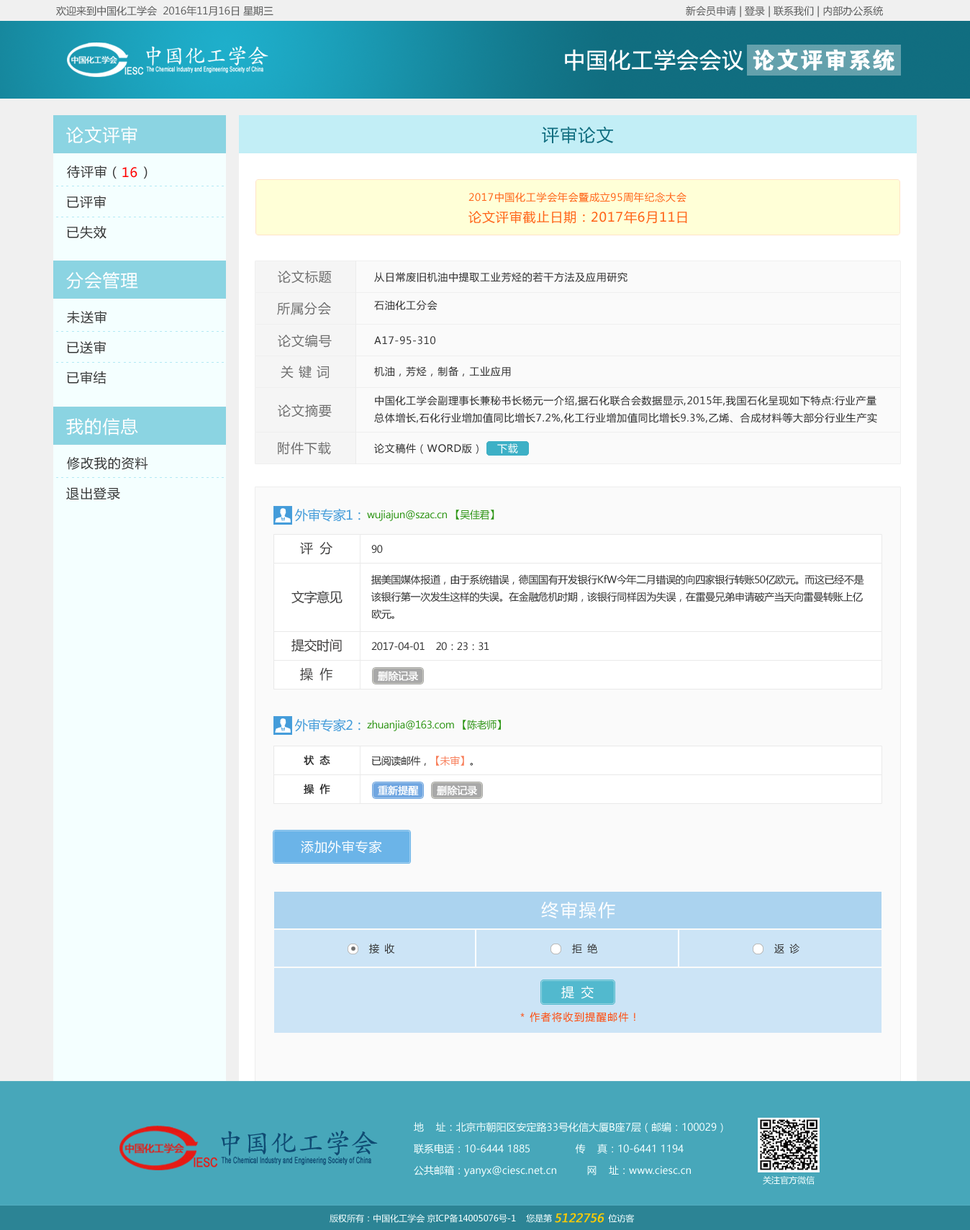
<style>
.page{position:relative;width:970px;height:1230px}
.page>*{position:absolute;margin:0}
.t1{font:10.1px "MicrosoftYaHei";color:#5d5e5e}
.t2{font:21.6px "MicrosoftYaHei";letter-spacing:0.05em;color:#ffffff}
.t3{font:22.9px "FZDHTJW--GB1-0";letter-spacing:0.05em;color:#ffffff}
.t4{font:17.3px "MicrosoftYaHei";letter-spacing:0.05em;color:#ffffff}
.t5{font:17.3px "MicrosoftYaHei";letter-spacing:0.05em;color:#116e80}
.t6{font:13px "MicrosoftYaHei";letter-spacing:0.05em;color:#363636}
.t7{font:13px "MicrosoftYaHei";letter-spacing:0.05em;color:#ff0000}
.t8{font:5.8px "SimSun";letter-spacing:0.4em;color:#b2e9f4}
.t9{font:10.1px "MicrosoftYaHei";letter-spacing:0.05em;color:#ff6317}
.t10{font:13px "MicrosoftYaHei";letter-spacing:0.05em;color:#ff6317}
.t11{font:13px "MicrosoftYaHei";letter-spacing:0.05em;color:#6e6e6e}
.t12{font:10.1px "MicrosoftYaHei";letter-spacing:0.05em;color:#2f2f2f}
.t13{font:10.1px/17.3px "MicrosoftYaHei";letter-spacing:0.05em;color:#2f2f2f}
.t14{font:10.1px "MicrosoftYaHei";letter-spacing:0.05em;color:#ffffff}
.t15{font:13px "MicrosoftYaHei";letter-spacing:-0.025em;color:#449cda}
.t16{font:10.1px "MicrosoftYaHei";letter-spacing:-0.025em;color:#2d9514}
.t17{font:13px "MicrosoftYaHei";letter-spacing:-0.025em;color:#414040}
.t18{font:10.1px "MicrosoftYaHei";letter-spacing:-0.025em;color:#323232}
.t19{font:10.1px/17.3px "MicrosoftYaHei";letter-spacing:-0.025em;color:#323232}
.t20{font:10.1px "MicrosoftYaHei";letter-spacing:-0.025em;color:#ffffff;font-weight:bold}
.t21{font:10.1px "MicrosoftYaHei";letter-spacing:-0.025em;color:#323232;font-weight:bold}
.t22{font:10.1px "MicrosoftYaHei";letter-spacing:-0.025em;color:#f87e59}
.t23{font:13px "MicrosoftYaHei";letter-spacing:0.05em;color:#ffffff}
.t24{font:17.3px "MicrosoftYaHei";letter-spacing:0.1em;color:#ffffff}
.t25{font:13px "MicrosoftYaHei";letter-spacing:-0.025em;color:#ffffff}
.t26{font:10.1px "MicrosoftYaHei";letter-spacing:0.1em;color:#ff4c0d}
.t27{font:10.1px/21.6px "MicrosoftYaHei";color:#f4ffff}
.t28{font:8.6px "MicrosoftYaHei";color:#f4ffff}
.t29{font:11.5px "MicrosoftYaHei";color:#ffcc00;font-weight:bold;font-style:italic}
</style>
<div class="page">
<p class="t1" style="left:56px;top:6px;width:217px;height:10px">欢迎来到中国化工学会  2016年11月16日 星期三</p>
<p class="t1" style="left:686px;top:6px;width:197px;height:11px">新会员申请 | 登录 | 联系我们 | 内部办公系统</p>
<p class="t2" style="left:565px;top:49px;width:178px;height:22px">中国化工学会会议</p>
<p class="t3" style="left:753px;top:49px;width:141px;height:22px">论文评审系统</p>
<p class="t4" style="left:66px;top:126px;width:71px;height:18px">论文评审</p>
<p class="t5" style="left:542px;top:126px;width:72px;height:18px">评审论文</p>
<p class="t6" style="left:67px;top:165px;width:80px;height:14px">待评审（    ）</p>
<p class="t7" style="left:122px;top:167px;width:15px;height:11px">16</p>
<p class="t8" style="left:56px;top:186px;width:168px;height:0px">---------------------------------</p>
<p class="t6" style="left:67px;top:195px;width:39px;height:14px">已评审</p>
<p class="t9" style="left:468px;top:192px;width:218px;height:10px">2017中国化工学会年会暨成立95周年纪念大会</p>
<p class="t8" style="left:56px;top:217px;width:168px;height:0px">---------------------------------</p>
<p class="t10" style="left:468px;top:210px;width:219px;height:14px">论文评审截止日期：2017年6月11日</p>
<p class="t6" style="left:67px;top:226px;width:39px;height:13px">已失效</p>
<p class="t4" style="left:66px;top:272px;width:72px;height:17px">分会管理</p>
<p class="t11" style="left:278px;top:271px;width:54px;height:12px">论文标题</p>
<p class="t12" style="left:374px;top:272px;width:253px;height:10px">从日常废旧机油中提取工业芳烃的若干方法及应用研究</p>
<p class="t11" style="left:277px;top:302px;width:54px;height:13px">所属分会</p>
<p class="t12" style="left:374px;top:300px;width:63px;height:10px">石油化工分会</p>
<p class="t6" style="left:67px;top:310px;width:39px;height:14px">未送审</p>
<p class="t8" style="left:56px;top:331px;width:168px;height:1px">---------------------------------</p>
<p class="t6" style="left:67px;top:340px;width:39px;height:14px">已送审</p>
<p class="t11" style="left:278px;top:334px;width:54px;height:13px">论文编号</p>
<p class="t12" style="left:374px;top:336px;width:61px;height:9px">A17-95-310</p>
<p class="t8" style="left:56px;top:362px;width:168px;height:1px">---------------------------------</p>
<p class="t11" style="left:281px;top:365px;width:48px;height:13px">关 键 词</p>
<p class="t6" style="left:67px;top:371px;width:39px;height:13px">已审结</p>
<p class="t12" style="left:374px;top:366px;width:137px;height:10px">机油，芳烃，制备，工业应用</p>
<p class="t13" style="left:374px;top:395px;width:503px;height:28px">中国化工学会副理事长兼秘书长杨元一介绍,据石化联合会数据显示,2015年,我国石化呈现如下特点:行业产量总体增长,石化行业增加值同比增长7.2%,化工行业增加值同比增长9.3%,乙烯、合成材料等大部分行业生产实现了不同程度的增长;全行业效益总体下滑,主营业务收入12.74万亿元</p>
<p class="t11" style="left:278px;top:404px;width:54px;height:13px">论文摘要</p>
<p class="t4" style="left:66px;top:417px;width:72px;height:18px">我的信息</p>
<p class="t11" style="left:278px;top:442px;width:53px;height:13px">附件下载</p>
<p class="t12" style="left:374px;top:443px;width:104px;height:11px">论文稿件（WORD版）</p>
<p class="t14" style="left:497px;top:443px;width:21px;height:10px">下载</p>
<p class="t6" style="left:67px;top:457px;width:81px;height:13px">修改我的资料</p>
<p class="t8" style="left:56px;top:477px;width:168px;height:1px">---------------------------------</p>
<p class="t6" style="left:66px;top:487px;width:54px;height:13px">退出登录</p>
<p class="t15" style="left:295px;top:508px;width:65px;height:14px">外审专家1：</p>
<p class="t16" style="left:367px;top:509px;width:127px;height:12px">wujiajun@szac.cn 【吴佳君】</p>
<p class="t17" style="left:300px;top:542px;width:32px;height:13px">评  分</p>
<p class="t18" style="left:371px;top:545px;width:12px;height:8px">90</p>
<p class="t19" style="left:371px;top:574px;width:493px;height:45px">据美国媒体报道，由于系统错误，德国国有开发银行KfW今年二月错误的向四家银行转账50亿欧元。而这已经不是该银行第一次发生这样的失误。在金融危机时期，该银行同样因为失误，在雷曼兄弟申请破产当天向雷曼转账上亿欧元。</p>
<p class="t17" style="left:291px;top:590px;width:51px;height:14px">文字意见</p>
<p class="t17" style="left:291px;top:639px;width:51px;height:13px">提交时间</p>
<p class="t18" style="left:371px;top:642px;width:118px;height:8px">2017-04-01    20：23：31</p>
<p class="t17" style="left:300px;top:668px;width:32px;height:13px">操  作</p>
<p class="t20" style="left:378px;top:671px;width:40px;height:10px">删除记录</p>
<p class="t15" style="left:295px;top:718px;width:65px;height:14px">外审专家2：</p>
<p class="t16" style="left:367px;top:719px;width:134px;height:12px">zhuanjia@163.com 【陈老师】</p>
<p class="t21" style="left:304px;top:755px;width:26px;height:10px">状  态</p>
<p class="t18" style="left:372px;top:755px;width:101px;height:10px">已阅读邮件，<span class="t22">【未审】</span>。</p>
<p class="t21" style="left:304px;top:783px;width:26px;height:11px">操  作</p>
<p class="t20" style="left:378px;top:785px;width:41px;height:11px">重新提醒</p>
<p class="t20" style="left:437px;top:785px;width:40px;height:11px">删除记录</p>
<p class="t23" style="left:301px;top:840px;width:81px;height:13px">添加外审专家</p>
<p class="t24" style="left:541px;top:901px;width:74px;height:18px">终审操作</p>
<p class="t18" style="left:369px;top:943px;width:26px;height:10px">接  收</p>
<p class="t18" style="left:572px;top:943px;width:25px;height:10px">拒  绝</p>
<p class="t18" style="left:774px;top:943px;width:25px;height:10px">返  诊</p>
<p class="t25" style="left:561px;top:986px;width:33px;height:13px">提  交</p>
<p class="t26" style="left:520px;top:1012px;width:115px;height:10px">* 作者将收到提醒邮件！</p>
<p class="t27" style="left:414px;top:1122px;width:309px;height:54px">地    址：北京市朝阳区安定路33号化信大厦B座7层（邮编：100029）<br>联系电话：10-6444 1885               传    真：10-6441 1194<br>公共邮箱：yanyx@ciesc.net.cn          网    址：www.ciesc.cn</p>
<p class="t28" style="left:763px;top:1176px;width:51px;height:8px">关注官方微信</p>
<p class="t28" style="left:330px;top:1213px;width:305px;height:9px">版权所有：中国化工学会 京ICP备14005076号-1    您是第                      位访客</p>
<p class="t29" style="left:555px;top:1212px;width:49px;height:10px">5122756</p>
</div>
